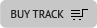
<style>
.page{position:relative;width:97px;height:28px;background:#c7c7c7}
.page>*{position:absolute;margin:0}
.t1{font:11px "PTSans-Regular";color:#222222}
</style>
<div class="page">
<p class="t1" style="left:11px;top:10px;width:53px;height:8px">BUY TRACK</p>
</div>
